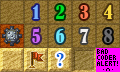
<style>
.page{position:relative;width:120px;height:72px}
.page>*{position:absolute;margin:0}
.t1{font:18px "BernardMT-Condensed";color:#78b1ff}
.t2{font:18px "BernardMT-Condensed";color:#00e025}
.t3{font:18px "BernardMT-Condensed";color:#ff7b53}
.t4{font:18px "BernardMT-Condensed";color:#f9d941}
.t5{font:18px "BernardMT-Condensed";color:#ce66f9}
.t6{font:18px "BernardMT-Condensed";color:#6de9fc}
.t7{font:18px "BernardMT-Condensed";color:#f1efed}
.t8{font:18px "BernardMT-Condensed";color:#6e6d6f}
.t9{font:18px "CenturySchoolbook-Bold";color:#0d5ed6}
</style>
<div class="page">
<p class="t1" style="left:33px;top:5px;width:6px;height:14px">1</p>
<p class="t2" style="left:56px;top:5px;width:9px;height:14px">2</p>
<p class="t3" style="left:80px;top:5px;width:9px;height:14px">3</p>
<p class="t4" style="left:104px;top:5px;width:9px;height:14px">4</p>
<p class="t5" style="left:32px;top:28px;width:8px;height:15px">5</p>
<p class="t6" style="left:56px;top:29px;width:9px;height:14px">6</p>
<p class="t7" style="left:80px;top:29px;width:9px;height:14px">7</p>
<p class="t8" style="left:104px;top:29px;width:9px;height:14px">8</p>
<p class="t9" style="left:56px;top:53px;width:8px;height:13px">?</p>
</div>
